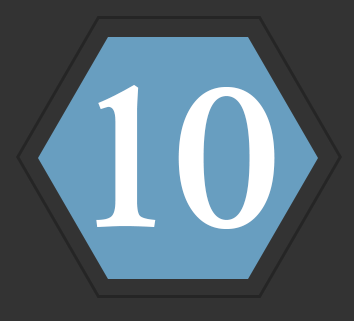
<style>
.page{position:relative;width:354px;height:321px;background:#333333}
.page>*{position:absolute;margin:0}
.t1{font:280px "Rod";color:#ffffff}
</style>
<div class="page">
<p class="t1" style="left:96px;top:84px;width:60px;height:143px">1</p>
<p class="t1" style="left:178px;top:86px;width:97px;height:143px">0</p>
</div>
